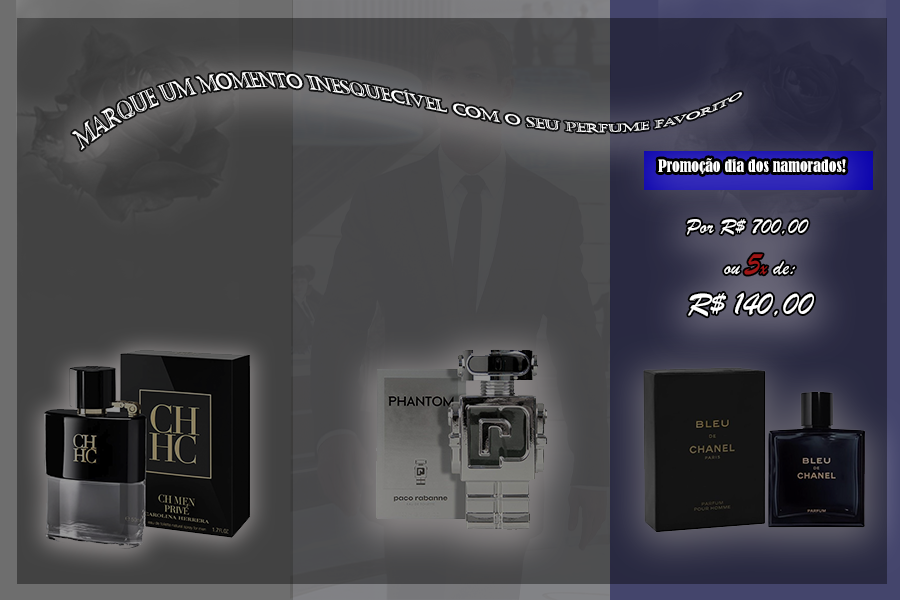
<style>
.page{position:relative;width:900px;height:600px}
.page>*{position:absolute;margin:0}
.t1{font:16px "Castellar";color:#ffffff}
.t2{font:16px "BernardMT-Condensed";color:#ffffff}
.t3{font:22.3px "BrushScriptMT";color:#ffffff}
.t4{font:33.5px "BrushScriptMT";color:#a01515}
.t5{font:22.3px "BrushScriptMT";color:#a01515}
.t6{font:33.5px "BrushScriptMT";color:#ffffff}
</style>
<div class="page">
<p class="t1" style="left:72px;top:72px;width:670px;height:78px;rotate:-10deg">Marque um momento inesquecível com o seu perfume favorito</p>
<p class="t2" style="left:658px;top:158px;width:188px;height:16px">Promoção dia dos namorados!</p>
<p class="t3" style="left:687px;top:219px;width:127px;height:98px">Por R$ 700,00<br>      ou <span class="t4">5</span><span class="t5">x</span> de:<br><span class="t6">R$ 140,00</span></p>
</div>
